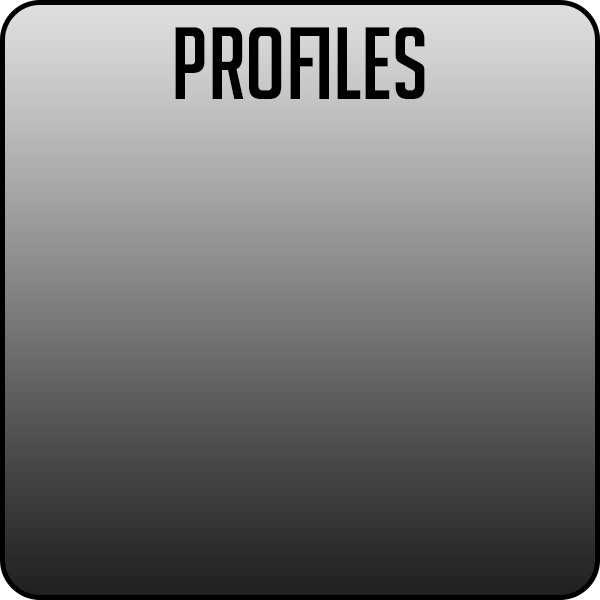
<style>
.page{position:relative;width:600px;height:600px}
.page>*{position:absolute;margin:0}
.t1{font:100px "BigNoodleTitling";color:#000000}
</style>
<div class="page">
<p class="t1" style="left:175px;top:27px;width:250px;height:72px">Profiles</p>
</div>
